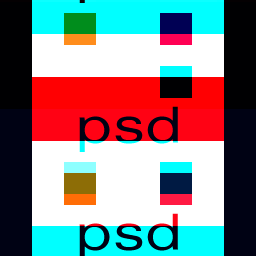
<style>
.page{position:relative;width:256px;height:256px;background:#ffffff}
.page>*{position:absolute;margin:0}
.t1{font:49.8px "UniversLTStd-Ex";letter-spacing:-0.005em;color:#000214}
</style>
<div class="page">
<p class="t1" style="left:79px;top:104px;width:99px;height:46px">psd</p>
</div>
